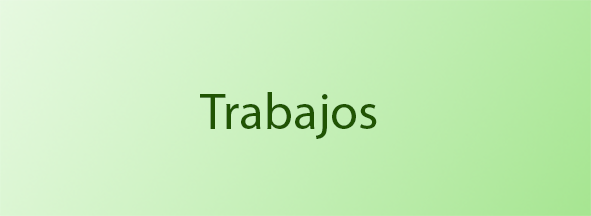
<style>
.page{position:relative;width:591px;height:216px}
.page>*{position:absolute;margin:0}
.t1{font:51.1px "MyriadPro-Regular";color:#205403}
</style>
<div class="page">
<p class="t1" style="left:200px;top:92px;width:177px;height:47px">Trabajos</p>
</div>
